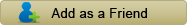
<style>
.page{position:relative;width:187px;height:25px}
.page>*{position:absolute;margin:0}
.t1{font:13px "ArialMT";letter-spacing:0.025em;color:#000000}
</style>
<div class="page">
<p class="t1" style="left:51px;top:8px;width:96px;height:10px">Add as a Friend</p>
</div>
